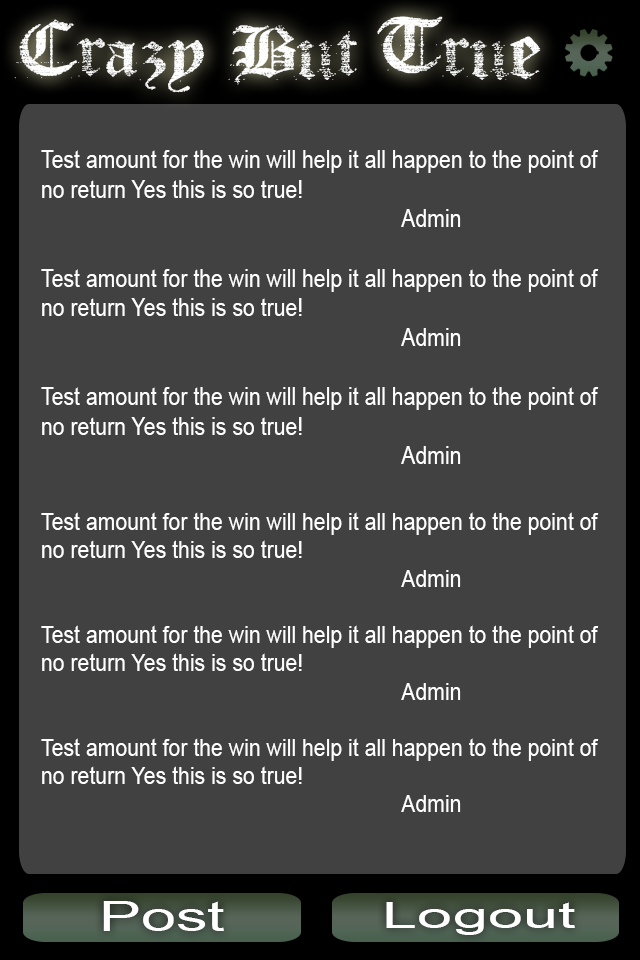
<style>
.page{position:relative;width:640px;height:960px;background:#414141}
.page>*{position:absolute;margin:0}
.t1{font:72px "Faith-Collapsing";color:#ffffff;scale:1.18 1}
.t2{font:24.7px "ArialMT";color:#ffffff;scale:0.86 1}
.t3{font:23.5px "ArialMT";color:#ffffff;scale:0.9 1}
.t4{font:40.6px "ArialMT";color:#ffffff;scale:1.55 1}
.t5{font:35.5px "ArialMT";color:#ffffff;scale:1.79 1}
</style>
<div class="page">
<p class="t1" style="left:14px;top:16px;width:527px;height:77px">Crazy But True</p>
<p class="t2" style="left:41px;top:150px;width:558px;height:314px">Test amount for the win will help it all happen to the point of no return Yes this is so true!<br>          Admin<br><br>Test amount for the win will help it all happen to the point of no return Yes this is so true!<br>          Admin<br><br>Test amount for the win will help it all happen to the point of no return Yes this is so true!<br>          Admin</p>
<p class="t3" style="left:41px;top:512px;width:558px;height:300px">Test amount for the win will help it all happen to the point of no return Yes this is so true!<br>          Admin<br><br>Test amount for the win will help it all happen to the point of no return Yes this is so true!<br>          Admin<br><br>Test amount for the win will help it all happen to the point of no return Yes this is so true!<br>          Admin</p>
<p class="t4" style="left:103px;top:901px;width:121px;height:30px">Post</p>
<p class="t5" style="left:386px;top:902px;width:189px;height:33px">Logout</p>
</div>
